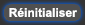
<style>
.page{position:relative;width:85px;height:25px;background:#505050}
.page>*{position:absolute;margin:0}
.t1{font:12px "Arial-BoldMT";color:#ffffff}
</style>
<div class="page">
<p class="t1" style="left:9px;top:8px;width:68px;height:9px">Réinitialiser</p>
</div>
